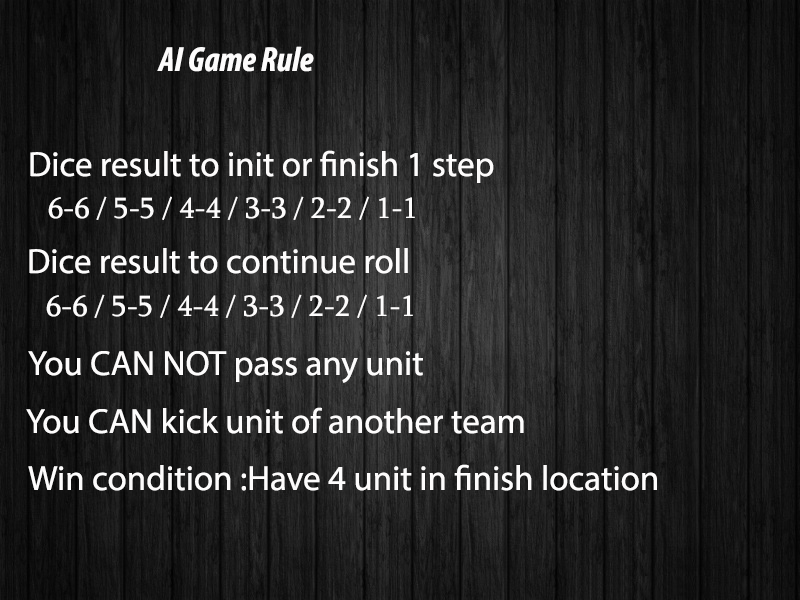
<style>
.page{position:relative;width:800px;height:600px}
.page>*{position:absolute;margin:0}
.t1{font:35px "MyriadPro-BoldCondIt";color:#fdfcfc}
.t2{font:35px "MyriadPro-Regular";color:#fdfcfc}
.t3{font:30px "Sylfaen";color:#fdfcfc}
</style>
<div class="page">
<p class="t1" style="left:157px;top:46px;width:157px;height:26px">AI Game Rule</p>
<p class="t2" style="left:30px;top:150px;width:464px;height:33px">Dice result to init or finish 1 step</p>
<p class="t3" style="left:48px;top:196px;width:367px;height:24px">1-1 / 2-2 / 3-3 / 4-4 / 5-5 / 6-6</p>
<p class="t2" style="left:29px;top:248px;width:379px;height:26px">Dice result to continue roll</p>
<p class="t3" style="left:46px;top:294px;width:367px;height:24px">1-1 / 2-2 / 3-3 / 4-4 / 5-5 / 6-6</p>
<p class="t2" style="left:28px;top:351px;width:395px;height:32px">You CAN NOT pass any unit</p>
<p class="t2" style="left:26px;top:407px;width:498px;height:27px">You CAN kick unit of another team</p>
<p class="t2" style="left:28px;top:464px;width:629px;height:27px">Win condition :Have 4 unit in finish location</p>
</div>
